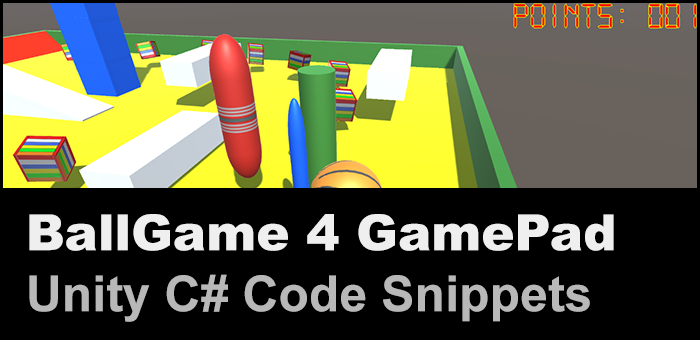
<style>
.page{position:relative;width:700px;height:340px;background:#000000}
.page>*{position:absolute;margin:0}
.t1{font:50px "Arial-Black";color:#ffffff}
.t2{font:50px "Arial-BoldMT";color:#b8b8b8}
</style>
<div class="page">
<p class="t1" style="left:29px;top:214px;width:585px;height:37px">BallGame 4 GamePad</p>
<p class="t2" style="left:29px;top:274px;width:561px;height:48px">Unity C# Code Snippets</p>
</div>
